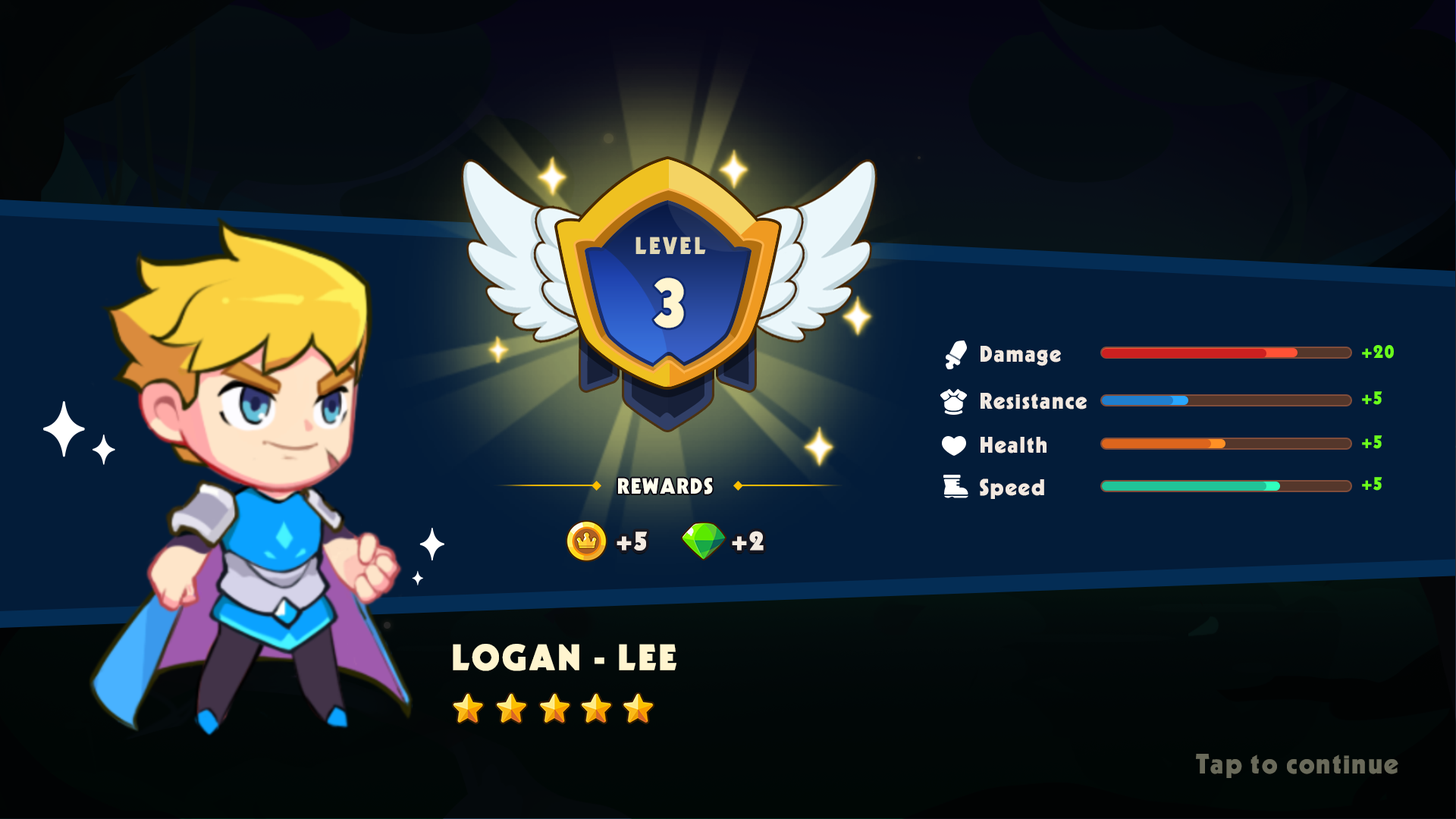
<style>
.page{position:relative;width:1456px;height:819px}
.page>*{position:absolute;margin:0}
.t1{font:23.4px "UTM-Kabel-KT";letter-spacing:0.1em;color:#e0d7b4;text-transform:uppercase}
.t2{font:70.3px "UTM-Kabel-KT";letter-spacing:0.075em;color:#fff5cf;text-transform:uppercase}
.t3{font:22.2px "UTM-Kabel-KT";letter-spacing:0.06em;color:#f2e9e1}
.t4{font:18.5px "UTM-Kabel-KT";letter-spacing:0.06em;color:#6bff1a;text-transform:uppercase}
.t5{font:21.4px "UTM-Kabel-KT";letter-spacing:0.06em;color:#ffffee}
.t6{font:26.4px "UTM-Kabel-KT";letter-spacing:0.06em;color:#f3eae1;font-weight:bold}
.t7{font:34.9px "UTM-Kabel-KT";letter-spacing:0.06em;color:#fff5cf;text-transform:uppercase;font-weight:bold}
.t8{font:27.3px "UTM-Kabel-KT";letter-spacing:0.06em;color:#6a6a5a}
</style>
<div class="page">
<p class="t1" style="left:635px;top:237px;width:71px;height:17px">level</p>
<p class="t2" style="left:654px;top:278px;width:30px;height:50px">3</p>
<p class="t3" style="left:981px;top:346px;width:80px;height:20px">Damage</p>
<p class="t4" style="left:1362px;top:345px;width:32px;height:14px">+20</p>
<p class="t3" style="left:981px;top:393px;width:106px;height:16px">Resistance</p>
<p class="t4" style="left:1362px;top:391px;width:20px;height:14px">+5</p>
<p class="t3" style="left:981px;top:437px;width:65px;height:16px">Health</p>
<p class="t4" style="left:1362px;top:435px;width:20px;height:14px">+5</p>
<p class="t5" style="left:618px;top:478px;width:95px;height:16px">REWARDS</p>
<p class="t3" style="left:980px;top:479px;width:64px;height:20px">Speed</p>
<p class="t4" style="left:1362px;top:477px;width:20px;height:14px">+5</p>
<p class="t6" style="left:617px;top:532px;width:30px;height:19px">+5</p>
<p class="t6" style="left:732px;top:531px;width:32px;height:20px">+2</p>
<p class="t7" style="left:453px;top:644px;width:223px;height:27px">LOGAN - LEE</p>
<p class="t8" style="left:1196px;top:754px;width:202px;height:24px">Tap to continue</p>
</div>
